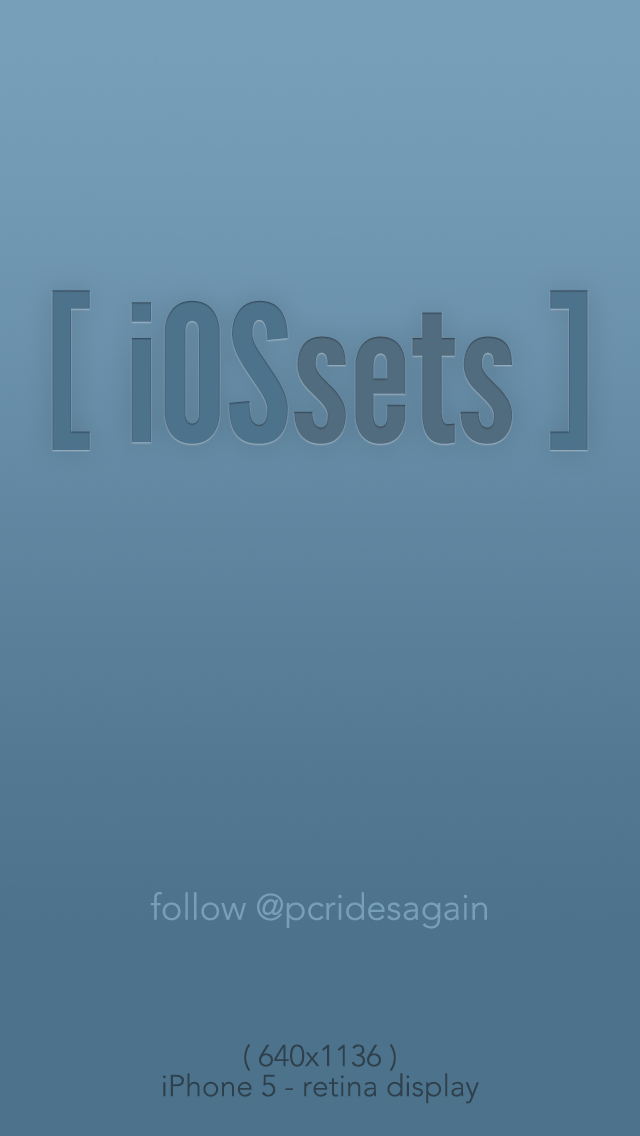
<style>
.page{position:relative;width:640px;height:1136px}
.page>*{position:absolute;margin:0}
.t1{font:190px "LeagueGothic";color:#4d728c}
.t2{font:190px "LeagueGothic";color:#516c7f}
.t3{font:36px "Avenir-Light";color:#789fba}
.t4{font:30px/30px "Avenir-Light";color:#2e404c}
</style>
<div class="page">
<p class="t1" style="left:52px;top:290px;width:536px;height:160px">[ iOS<span class="t2">sets </span>]</p>
<p class="t3" style="left:150px;top:892px;width:337px;height:37px">follow @pcridesagain</p>
<p class="t4" style="left:163px;top:1044px;width:316px;height:60px;text-align:center">( 640x1136 )<br>iPhone 5 - retina display</p>
</div>
